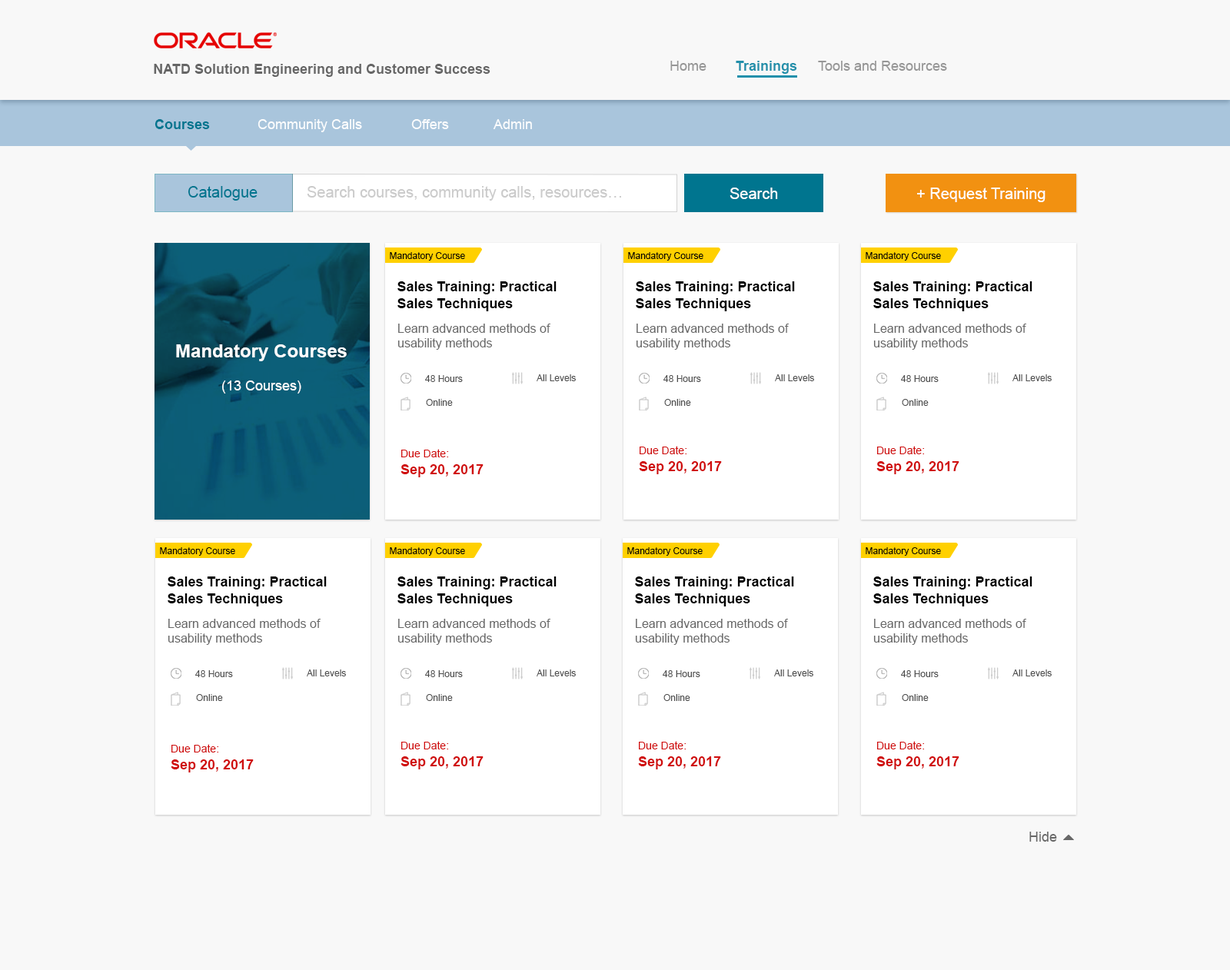
<style>
.page{position:relative;width:1230px;height:970px;background:#f8f8f8}
.page>*{position:absolute;margin:0}
.t1{font:13.8px "Arial-BoldMT";color:#666666}
.t2{font:13.8px "ArialMT";color:#969696}
.t3{font:13.8px "Arial-BoldMT";color:#2290ab}
.t4{font:13.8px "Arial-BoldMT";color:#00758f}
.t5{font:13.8px "ArialMT";color:#ffffff}
.t6{font:15.4px "ArialMT";color:#00758f}
.t7{font:15.4px "ArialMT";color:#cbcbcb}
.t8{font:15.4px "ArialMT";color:#ffffff}
.t9{font:9.2px "ArialMT";color:#010100}
.t10{font:13.8px "Arial-BoldMT";color:#000000}
.t11{font:12.3px "ArialMT";color:#686868}
.t12{font:18.4px "Arial-BoldMT";color:#ffffff}
.t13{font:9.2px "ArialMT";color:#505050}
.t14{font:13.8px "Arial-BoldMT";color:#d00d0d}
.t15{font:10.8px "ArialMT";color:#d00d0d}
.t16{font:13.8px "ArialMT";color:#686868}
</style>
<div class="page">
<p class="t1" style="left:154px;top:64px;width:336px;height:13px">NATD Solution Engineering and Customer Success</p>
<p class="t2" style="left:670px;top:61px;width:36px;height:10px">Home</p>
<p class="t3" style="left:735px;top:61px;width:62px;height:13px">Trainings</p>
<p class="t2" style="left:818px;top:61px;width:129px;height:10px">Tools and Resources</p>
<p class="t4" style="left:154px;top:119px;width:56px;height:10px">Courses</p>
<p class="t5" style="left:257px;top:119px;width:105px;height:13px;opacity:0.95">Community Calls</p>
<p class="t5" style="left:411px;top:119px;width:38px;height:10px;opacity:0.95">Offers</p>
<p class="t5" style="left:493px;top:119px;width:39px;height:10px;opacity:0.95">Admin</p>
<p class="t6" style="left:188px;top:186px;width:69px;height:15px">Catalogue</p>
<p class="t7" style="left:307px;top:186px;width:314px;height:15px">Search courses, community calls, resources…</p>
<p class="t8" style="left:729px;top:188px;width:49px;height:11px">Search</p>
<p class="t8" style="left:917px;top:188px;width:128px;height:14px">+ Request Training</p>
<p class="t9" style="left:390px;top:252px;width:75px;height:9px">Mandatory Course</p>
<p class="t9" style="left:628px;top:252px;width:75px;height:9px">Mandatory Course</p>
<p class="t9" style="left:865px;top:252px;width:76px;height:9px">Mandatory Course</p>
<p class="t10" style="left:397px;top:281px;width:159px;height:30px">Sales Training: Practical Sales Techniques</p>
<p class="t10" style="left:636px;top:281px;width:159px;height:30px">Sales Training: Practical Sales Techniques</p>
<p class="t10" style="left:873px;top:281px;width:159px;height:30px">Sales Training: Practical Sales Techniques</p>
<p class="t11" style="left:397px;top:324px;width:153px;height:26px">Learn advanced methods of<br>usability methods</p>
<p class="t11" style="left:636px;top:324px;width:152px;height:26px">Learn advanced methods of<br>usability methods</p>
<p class="t11" style="left:873px;top:324px;width:153px;height:26px">Learn advanced methods of<br>usability methods</p>
<p class="t12" style="left:176px;top:344px;width:171px;height:49px;text-align:center">Mandatory Courses<br><span class="t5"><br>(13 Courses)</span></p>
<p class="t13" style="left:425px;top:375px;width:38px;height:7px">48 Hours</p>
<p class="t13" style="left:536px;top:374px;width:40px;height:7px">All Levels</p>
<p class="t13" style="left:663px;top:375px;width:38px;height:7px">48 Hours</p>
<p class="t13" style="left:775px;top:374px;width:39px;height:7px">All Levels</p>
<p class="t13" style="left:901px;top:375px;width:37px;height:7px">48 Hours</p>
<p class="t13" style="left:1012px;top:374px;width:39px;height:7px">All Levels</p>
<p class="t13" style="left:426px;top:399px;width:27px;height:7px">Online</p>
<p class="t13" style="left:664px;top:399px;width:27px;height:7px">Online</p>
<p class="t13" style="left:901px;top:399px;width:27px;height:7px">Online</p>
<p class="t14" style="left:400px;top:449px;width:83px;height:28px"><span class="t15">Due Date: <br></span>Sep 20, 2017</p>
<p class="t14" style="left:639px;top:446px;width:83px;height:28px"><span class="t15">Due Date: <br></span>Sep 20, 2017</p>
<p class="t14" style="left:876px;top:446px;width:83px;height:28px"><span class="t15">Due Date: <br></span>Sep 20, 2017</p>
<p class="t9" style="left:160px;top:547px;width:75px;height:9px">Mandatory Course</p>
<p class="t9" style="left:390px;top:547px;width:75px;height:9px">Mandatory Course</p>
<p class="t9" style="left:627px;top:547px;width:75px;height:9px">Mandatory Course</p>
<p class="t9" style="left:865px;top:547px;width:76px;height:9px">Mandatory Course</p>
<p class="t10" style="left:168px;top:576px;width:159px;height:30px">Sales Training: Practical Sales Techniques</p>
<p class="t10" style="left:397px;top:576px;width:159px;height:30px">Sales Training: Practical Sales Techniques</p>
<p class="t10" style="left:635px;top:576px;width:159px;height:30px">Sales Training: Practical Sales Techniques</p>
<p class="t10" style="left:873px;top:576px;width:159px;height:30px">Sales Training: Practical Sales Techniques</p>
<p class="t11" style="left:168px;top:619px;width:152px;height:26px">Learn advanced methods of<br>usability methods</p>
<p class="t11" style="left:397px;top:619px;width:153px;height:26px">Learn advanced methods of<br>usability methods</p>
<p class="t11" style="left:635px;top:619px;width:153px;height:26px">Learn advanced methods of<br>usability methods</p>
<p class="t11" style="left:873px;top:619px;width:153px;height:26px">Learn advanced methods of<br>usability methods</p>
<p class="t13" style="left:195px;top:670px;width:38px;height:7px">48 Hours</p>
<p class="t13" style="left:307px;top:669px;width:39px;height:7px">All Levels</p>
<p class="t13" style="left:425px;top:670px;width:38px;height:7px">48 Hours</p>
<p class="t13" style="left:536px;top:669px;width:40px;height:7px">All Levels</p>
<p class="t13" style="left:662px;top:670px;width:38px;height:7px">48 Hours</p>
<p class="t13" style="left:774px;top:669px;width:39px;height:7px">All Levels</p>
<p class="t13" style="left:901px;top:670px;width:37px;height:7px">48 Hours</p>
<p class="t13" style="left:1012px;top:669px;width:39px;height:7px">All Levels</p>
<p class="t13" style="left:196px;top:694px;width:27px;height:7px">Online</p>
<p class="t13" style="left:426px;top:694px;width:27px;height:7px">Online</p>
<p class="t13" style="left:663px;top:694px;width:27px;height:7px">Online</p>
<p class="t13" style="left:901px;top:694px;width:27px;height:7px">Online</p>
<p class="t14" style="left:171px;top:744px;width:83px;height:28px"><span class="t15">Due Date: <br></span>Sep 20, 2017</p>
<p class="t14" style="left:400px;top:741px;width:83px;height:28px"><span class="t15">Due Date: <br></span>Sep 20, 2017</p>
<p class="t14" style="left:638px;top:741px;width:83px;height:28px"><span class="t15">Due Date: <br></span>Sep 20, 2017</p>
<p class="t14" style="left:876px;top:741px;width:83px;height:28px"><span class="t15">Due Date: <br></span>Sep 20, 2017</p>
<p class="t16" style="left:1029px;top:831px;width:28px;height:10px">Hide</p>
</div>
